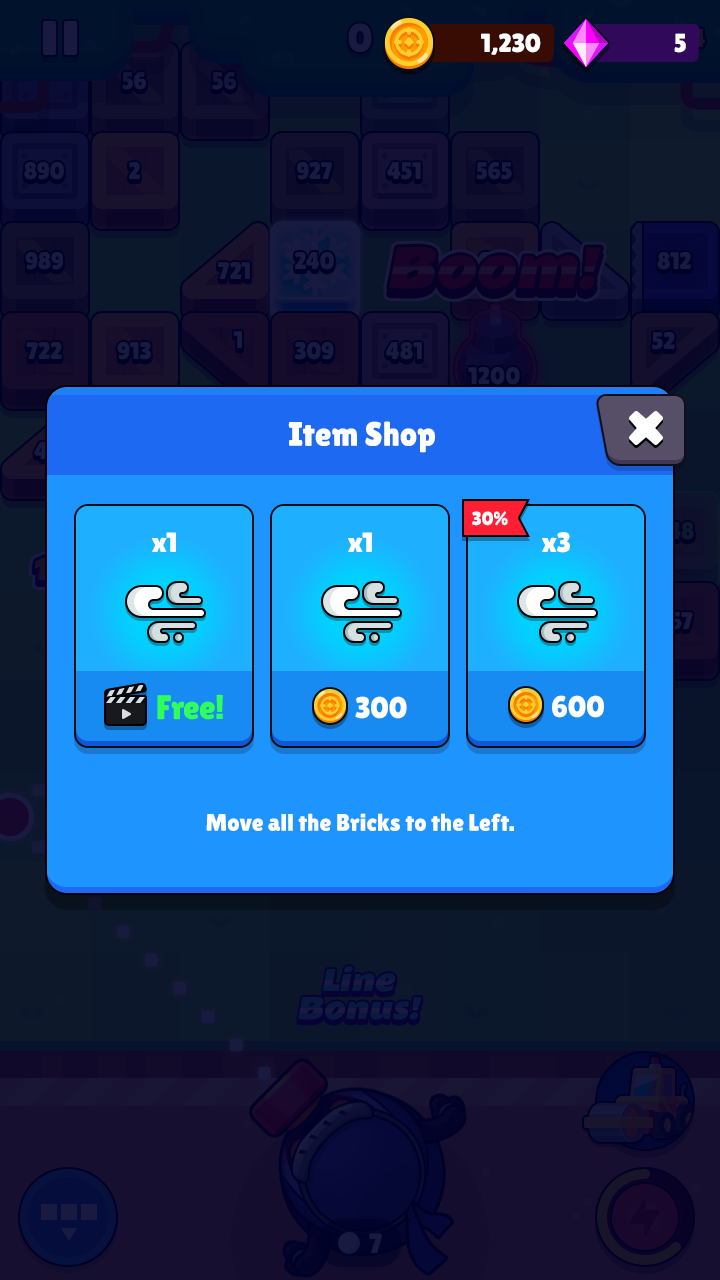
<style>
.page{position:relative;width:720px;height:1280px}
.page>*{position:absolute;margin:0}
.t1{font:26px "LilitaOne";letter-spacing:-0.01em;color:#ffffff;text-transform:uppercase}
.t2{font:34px "LilitaOne";color:#ffffff}
.t3{font:19px "LilitaOne";color:#ffffff;text-transform:uppercase}
.t4{font:28px "LilitaOne";color:#ffffff}
.t5{font:34px "LilitaOne";color:#30ff58}
.t6{font:30px "LilitaOne";color:#ffffff}
.t7{font:24px "LilitaOne";color:#ffffff}
</style>
<div class="page">
<p class="t1" style="left:481px;top:33px;width:60px;height:22px">1,230</p>
<p class="t1" style="left:674px;top:33px;width:12px;height:20px">5</p>
<p class="t2" style="left:288px;top:421px;width:147px;height:32px">Item Shop</p>
<p class="t3" style="left:472px;top:511px;width:36px;height:15px">30%</p>
<p class="t4" style="left:152px;top:532px;width:24px;height:20px">x1</p>
<p class="t4" style="left:348px;top:532px;width:24px;height:20px">x1</p>
<p class="t4" style="left:542px;top:532px;width:28px;height:21px">x3</p>
<p class="t5" style="left:157px;top:694px;width:66px;height:26px">Free!</p>
<p class="t6" style="left:355px;top:696px;width:52px;height:23px">300</p>
<p class="t6" style="left:552px;top:695px;width:52px;height:23px">600</p>
<p class="t7" style="left:206px;top:813px;width:308px;height:18px">Move all the Bricks to the Left.</p>
</div>
